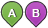
<style>
.page{position:relative;width:48px;height:28px;background:#ffffff}
.page>*{position:absolute;margin:0}
.t1{font:11px "Arial-BoldMT";letter-spacing:0.025em;color:#ffffff}
.t2{font:11px "Arial-BoldMT";letter-spacing:0.025em}
</style>
<div class="page">
<p class="t1" style="left:8px;top:9px;width:8px;height:8px">A</p>
<p class="t2" style="left:9px;top:9px;width:8px;height:8px">A</p>
<p class="t1" style="left:32px;top:9px;width:8px;height:8px">B</p>
<p class="t2" style="left:33px;top:9px;width:8px;height:8px">B</p>
</div>
